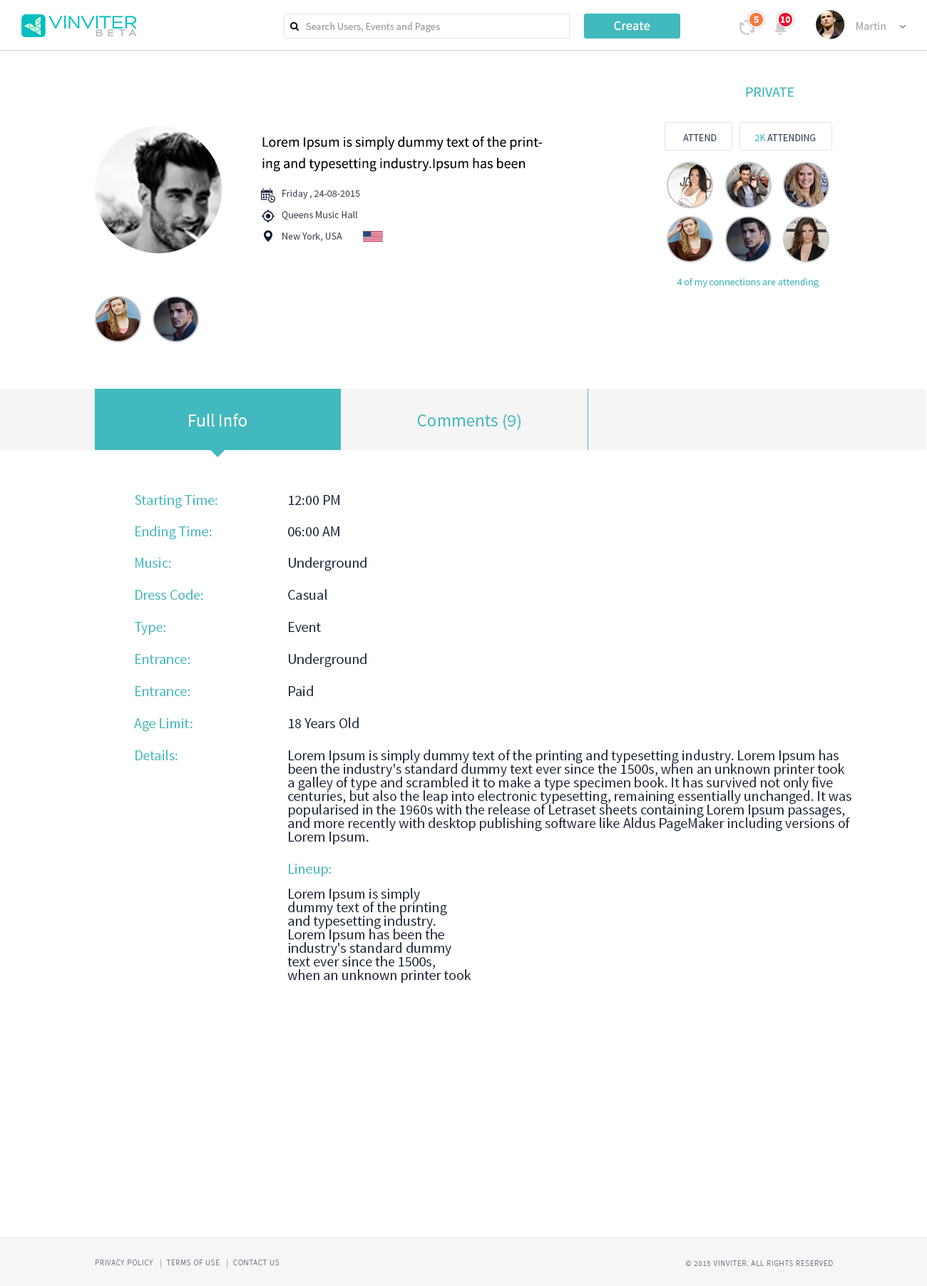
<style>
.page{position:relative;width:927px;height:1286px;background:#ffffff}
.page>*{position:absolute;margin:0}
.t1{font:9.3px "SourceSansPro-Bold";color:#ffffff}
.t2{font:10.2px "SourceSansPro-Regular";color:#999999}
.t3{font:12.8px "SourceSansPro-Regular";letter-spacing:0.02em;color:#ffffff}
.t4{font:11.4px "SourceSansPro-Regular";color:#a3a6ae}
.t5{font:14.3px "SourceSansPro-Regular";color:#42b9be}
.t6{font:14.3px/21.4px "SourceSansPro-Regular";color:#000000}
.t7{font:10px "SourceSansPro-Regular";color:#364656}
.t8{font:10px "SourceSansPro-Regular";color:#42b9be}
.t9{font:10px/14.3px "SourceSansPro-Regular";color:#464d5c}
.t10{font:17.8px "SourceSansPro-Regular";color:#ffffff}
.t11{font:17.8px "SourceSansPro-Regular";color:#42b9be}
.t12{font:14.3px "SourceSansPro-Regular";color:#162136}
.t13{font:14.3px/10px "SourceSansPro-Regular";color:#162136}
.t14{font:7.8px "SourceSansPro-Light";letter-spacing:0.075em;color:#747a85;text-transform:uppercase}
</style>
<div class="page">
<p class="t1" style="left:754px;top:16px;width:5px;height:7px">5</p>
<p class="t1" style="left:781px;top:16px;width:9px;height:7px">10</p>
<p class="t2" style="left:306px;top:22px;width:134px;height:11px">Search Users, Events and Pages</p>
<p class="t3" style="left:614px;top:21px;width:36px;height:10px">Create</p>
<p class="t4" style="left:857px;top:22px;width:29px;height:8px">Martin</p>
<p class="t5" style="left:746px;top:87px;width:49px;height:10px">PRIVATE</p>
<p class="t6" style="left:262px;top:136px;width:280px;height:36px">Lorem Ipsum is simply dummy text of the printing and typesetting industry.Ipsum has been</p>
<p class="t7" style="left:683px;top:134px;width:34px;height:7px">ATTEND</p>
<p class="t7" style="left:755px;top:134px;width:61px;height:7px"><span class="t8">2K </span>ATTENDING</p>
<p class="t9" style="left:282px;top:190px;width:78px;height:52px">Friday , 24-08-2015<br>Queens Music Hall<br>New York, USA</p>
<p class="t8" style="left:677px;top:278px;width:142px;height:9px">4 of my connections are attending</p>
<p class="t10" style="left:189px;top:414px;width:58px;height:13px">Full Info</p>
<p class="t11" style="left:417px;top:414px;width:104px;height:16px">Comments (9)</p>
<p class="t5" style="left:135px;top:495px;width:83px;height:14px">Starting Time:</p>
<p class="t12" style="left:289px;top:495px;width:51px;height:10px">12:00 PM</p>
<p class="t5" style="left:136px;top:526px;width:76px;height:14px">Ending Time:</p>
<p class="t12" style="left:288px;top:526px;width:52px;height:10px">06:00 AM</p>
<p class="t5" style="left:136px;top:558px;width:35px;height:10px">Music:</p>
<p class="t12" style="left:289px;top:557px;width:78px;height:14px">Underground</p>
<p class="t5" style="left:136px;top:589px;width:67px;height:11px">Dress Code:</p>
<p class="t12" style="left:288px;top:589px;width:39px;height:11px">Casual</p>
<p class="t5" style="left:135px;top:622px;width:30px;height:13px">Type:</p>
<p class="t12" style="left:289px;top:622px;width:32px;height:10px">Event</p>
<p class="t12" style="left:289px;top:653px;width:78px;height:15px">Underground</p>
<p class="t5" style="left:136px;top:654px;width:54px;height:10px">Entrance:</p>
<p class="t5" style="left:136px;top:686px;width:54px;height:10px">Entrance:</p>
<p class="t12" style="left:289px;top:685px;width:24px;height:11px">Paid</p>
<p class="t5" style="left:134px;top:718px;width:59px;height:14px">Age Limit:</p>
<p class="t12" style="left:289px;top:718px;width:70px;height:10px">18 Years Old</p>
<p class="t5" style="left:136px;top:750px;width:42px;height:10px">Details:</p>
<p class="t13" style="left:288px;top:750px;width:564px;height:94px">Lorem Ipsum is simply dummy text of the printing and typesetting industry. Lorem Ipsum has <br>been the industry's standard dummy text ever since the 1500s, when an unknown printer took <br>a galley of type and scrambled it to make a type specimen book. It has survived not only five <br>centuries, but also the leap into electronic typesetting, remaining essentially unchanged. It was <br>popularised in the 1960s with the release of Letraset sheets containing Lorem Ipsum passages, <br>and more recently with desktop publishing software like Aldus PageMaker including versions of <br>Lorem Ipsum.</p>
<p class="t5" style="left:289px;top:864px;width:42px;height:13px">Lineup:</p>
<p class="t13" style="left:287px;top:888px;width:184px;height:95px">Lorem Ipsum is simply <br>dummy text of the printing <br>and typesetting industry. <br>Lorem Ipsum has been the <br>industry's standard dummy <br>text ever since the 1500s, <br>when an unknown printer took</p>
<p class="t14" style="left:95px;top:1259px;width:185px;height:8px">Privacy Policy   |  Terms of Use   |  Contact us</p>
<p class="t14" style="left:685px;top:1260px;width:148px;height:6px">© 2015 VINVITER. All rights reserved</p>
</div>
